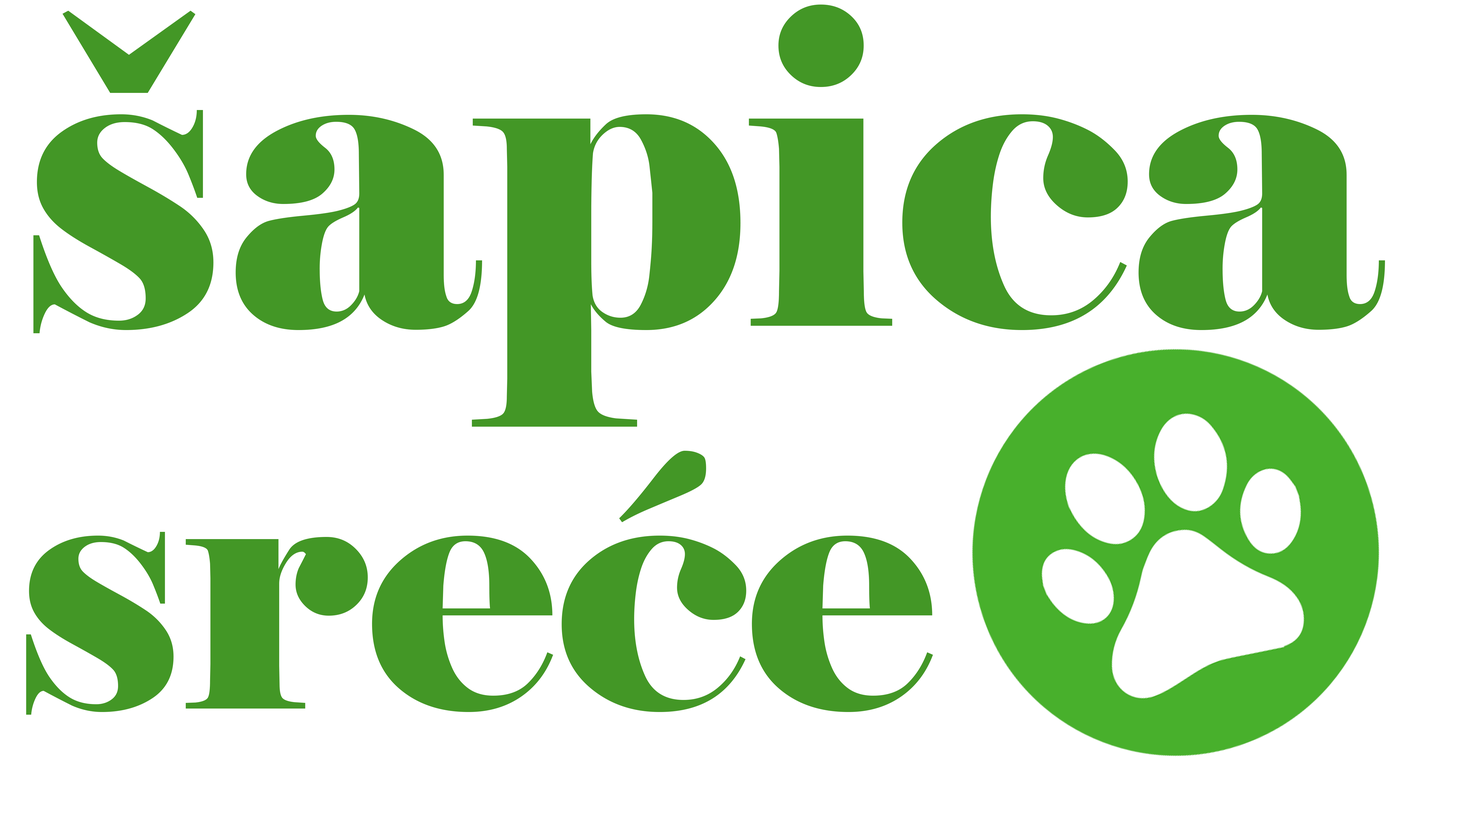
<style>
.page{position:relative;width:1457px;height:818px;background:#ffffff}
.page>*{position:absolute;margin:0}
.t1{font:436.9px "Elephant-Regular";color:#439726}
.t2{font:357.6px "Elephant-Regular";color:#439726}
</style>
<div class="page">
<p class="t1" style="left:33px;top:5px;width:1352px;height:422px">šapica</p>
<p class="t2" style="left:26px;top:451px;width:907px;height:264px">sreće</p>
</div>
